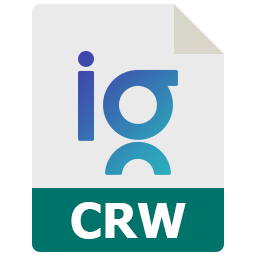
<style>
.page{position:relative;width:256px;height:256px;background:#eaeaea}
.page>*{position:absolute;margin:0}
.t1{font:48px "Tahoma-Bold";color:#ffffff}
</style>
<div class="page">
<p class="t1" style="left:71px;top:202px;width:115px;height:37px">CRW</p>
</div>
